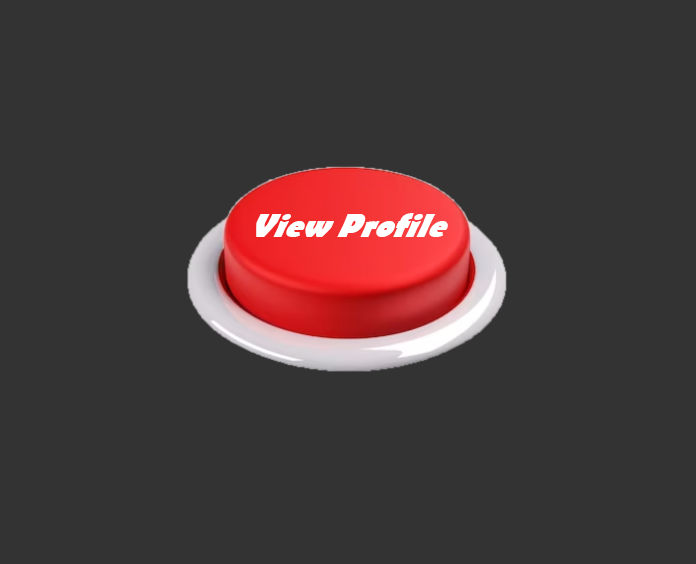
<style>
.page{position:relative;width:696px;height:564px;background:#333333}
.page>*{position:absolute;margin:0}
.t1{font:36.7px "BerlinSansFB-Bold";color:#ffffff;scale:0.91 1}
</style>
<div class="page">
<p class="t1" style="left:256px;top:213px;width:192px;height:24px">View Profile</p>
</div>
